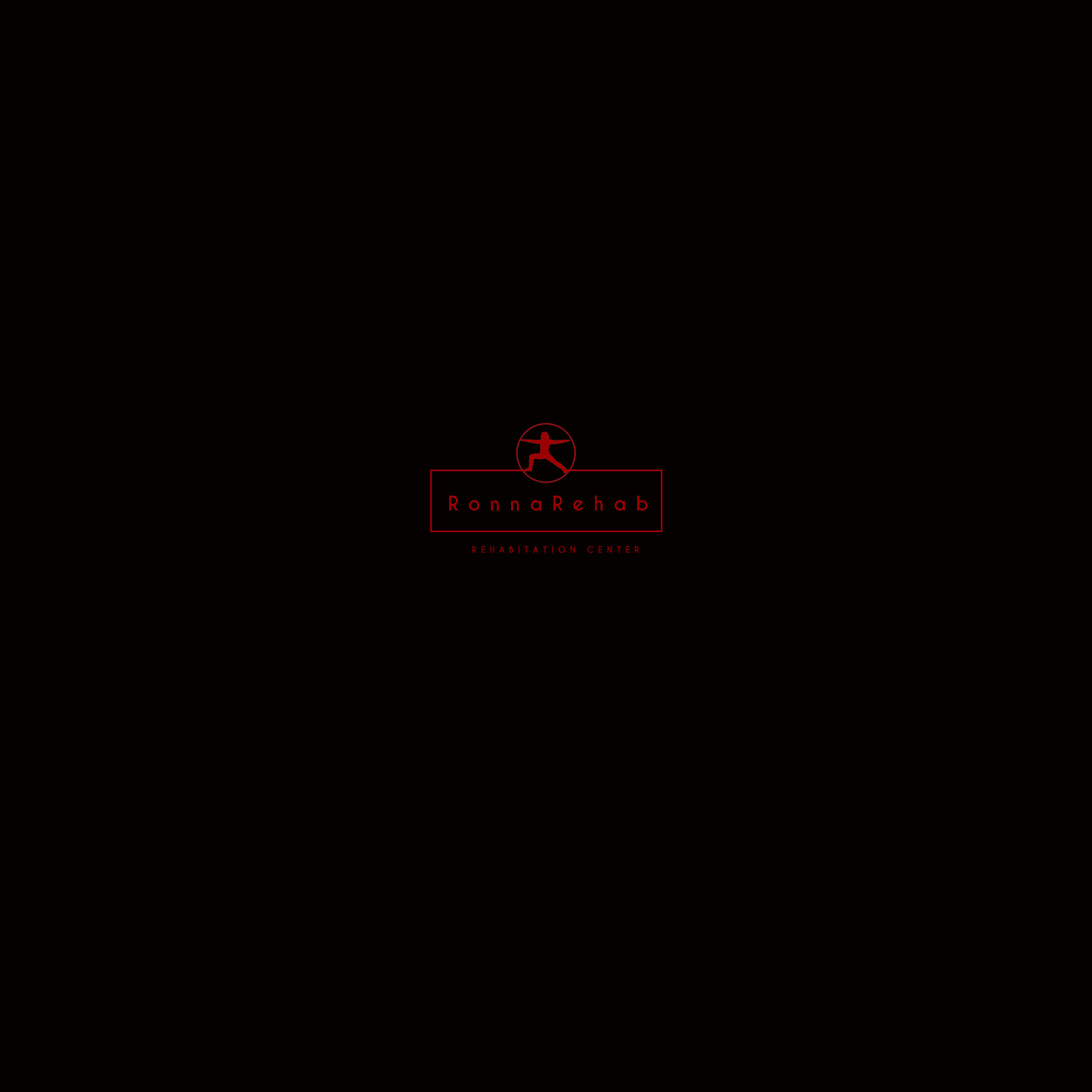
<style>
.page{position:relative;width:1092px;height:1092px;background:#060101}
.page>*{position:absolute;margin:0}
.t1{font:18.9px "CaviarDreams-Bold";letter-spacing:0.5em;color:#9c0004}
.t2{font:8.5px "CaviarDreams-Bold";letter-spacing:0.5em;color:#9c0004}
</style>
<div class="page">
<p class="t1" style="left:449px;top:495px;width:199px;height:16px">RonnaRehab</p>
<p class="t2" style="left:472px;top:546px;width:167px;height:7px">REHABITATION CENTER</p>
</div>
